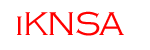
<style>
.page{position:relative;width:150px;height:50px;background:#ffffff}
.page>*{position:absolute;margin:0}
.t1{font:34px "CopperplateGothic-Light";letter-spacing:-0.025em;color:#ff0000}
</style>
<div class="page">
<p class="t1" style="left:17px;top:11px;width:107px;height:25px">iKNSA</p>
</div>
